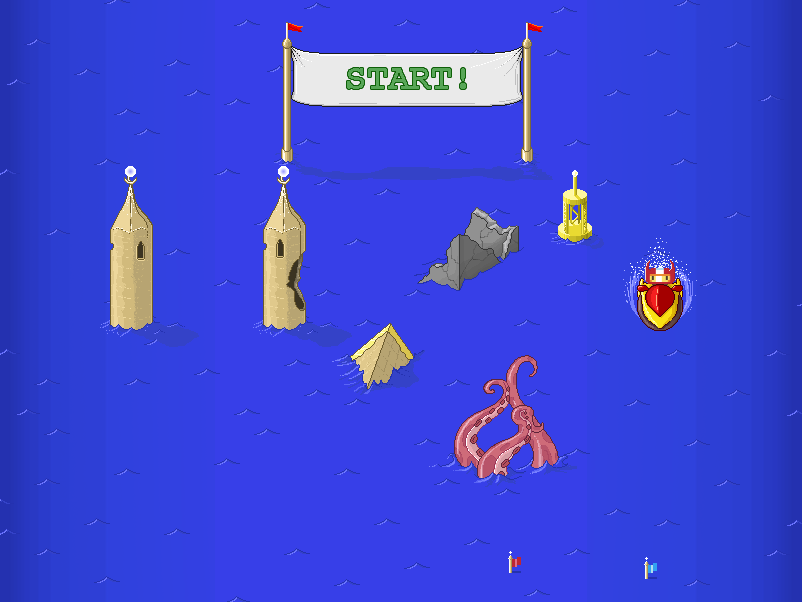
<style>
.page{position:relative;width:802px;height:602px;background:#373fe8}
.page>*{position:absolute;margin:0}
.t1{font:36.5px "Courier";color:#58a657}
</style>
<div class="page">
<p class="t1" style="left:347px;top:68px;width:119px;height:21px">START!</p>
</div>
